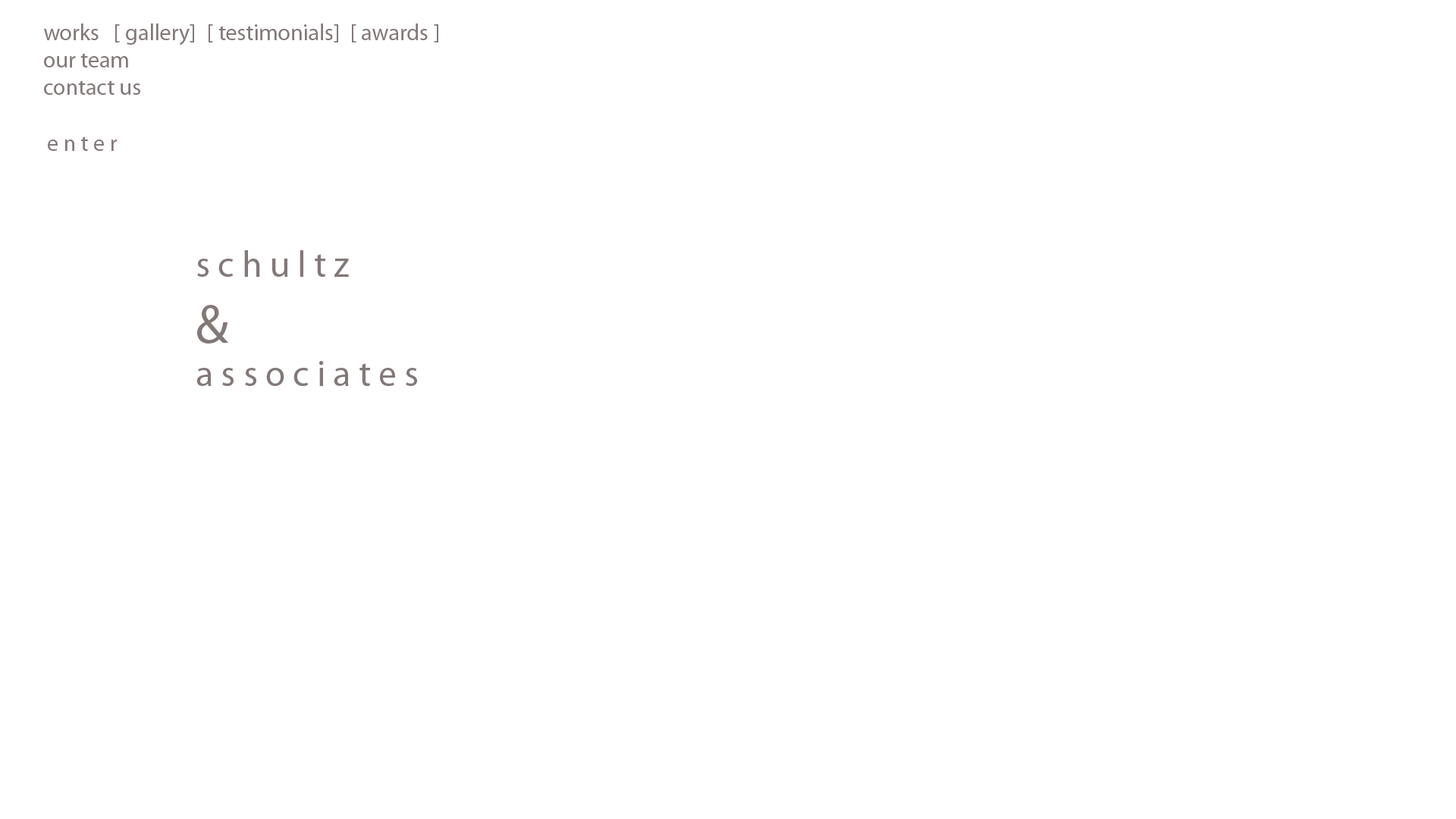
<style>
.page{position:relative;width:1456px;height:819px;background:#ffffff}
.page>*{position:absolute;margin:0}
.t1{font:22.7px "MyriadPro-Regular";color:#837878}
.t2{font:36.4px "MyriadPro-Regular";color:#837878}
.t3{font:54.6px "MyriadPro-Regular";color:#837878}
</style>
<div class="page">
<p class="t1" style="left:44px;top:24px;width:394px;height:71px">works   [ gallery] [ testimonials]  [ awards ]<br>our team<br>contact us</p>
<p class="t1" style="left:48px;top:136px;width:70px;height:15px">e n t e r</p>
<p class="t2" style="left:196px;top:250px;width:221px;height:136px">s c h u l t z<br><span class="t3">&amp;<br></span>a s s o c i a t e s</p>
</div>
